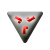
<style>
.page{position:relative;width:50px;height:50px;background:#ffffff}
.page>*{position:absolute;margin:0}
.t1{font:10px "StencilStd"}
</style>
<div class="page">
<p class="t1" style="left:14px;top:15px;width:8px;height:9px;rotate:-62deg">J</p>
<p class="t1" style="left:26px;top:16px;width:10px;height:6px;rotate:58deg">J</p>
<p class="t1" style="left:22px;top:26px;width:6px;height:8px;rotate:180deg">J</p>
</div>
